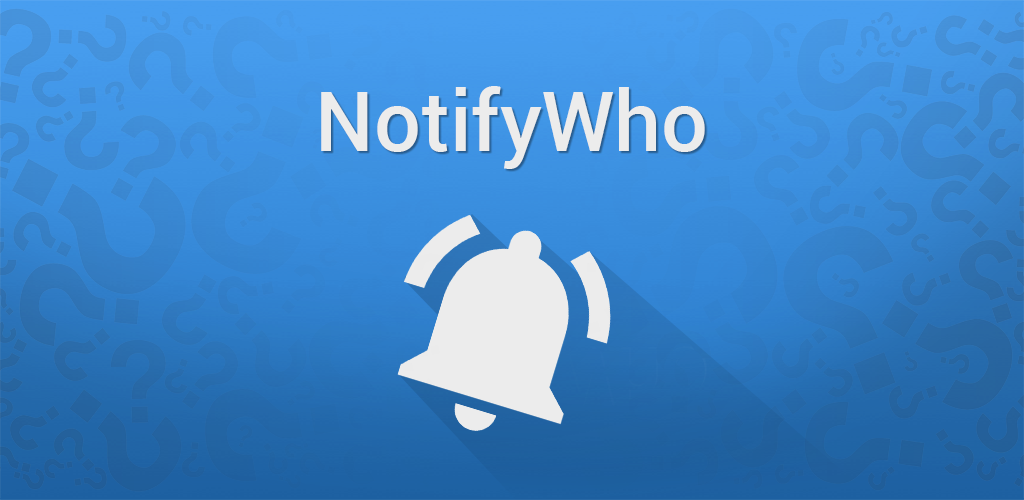
<style>
.page{position:relative;width:1024px;height:500px}
.page>*{position:absolute;margin:0}
.t1{font:83.3px "Roboto-Medium";color:#ececec}
</style>
<div class="page">
<p class="t1" style="left:321px;top:86px;width:384px;height:83px">NotifyWho</p>
</div>
